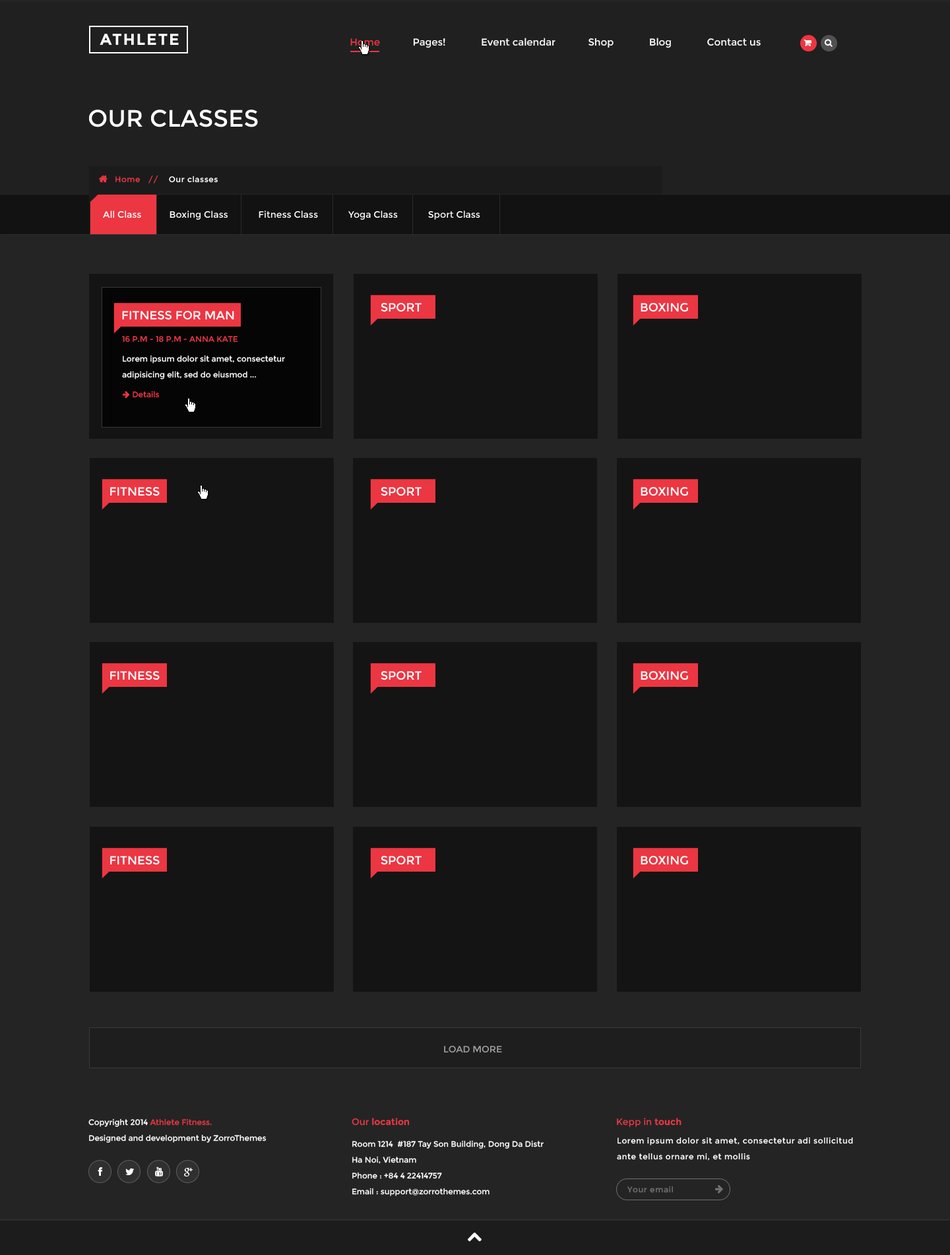
<style>
.page{position:relative;width:950px;height:1255px;background:#141414}
.page>*{position:absolute;margin:0}
.t1{font:15.8px "Montserrat-Bold";letter-spacing:0.075em;color:#ffffff;text-transform:uppercase}
.t2{font:9.9px "Montserrat-Regular";color:#ffffff}
.t3{font:9.9px "Montserrat-Regular";color:#ec3642}
.t4{font:23.8px "Montserrat-Regular";color:#ffffff;text-transform:uppercase}
.t5{font:7.9px "Montserrat-Regular";letter-spacing:0.05em;color:#ffffff}
.t6{font:7.9px "Montserrat-Regular";letter-spacing:0.05em;color:#ec3642}
.t7{font:9.2px "Montserrat-Regular";color:#fefefe}
.t8{font:11.9px "Montserrat-Regular";color:#ffffff;text-transform:uppercase}
.t9{font:7.9px "Montserrat-Regular";color:#ec3642;text-transform:uppercase}
.t10{font:7.9px/15.8px "Montserrat-Regular";color:#ffffff}
.t11{font:7.9px/19.8px "Montserrat-Regular";color:#ec3642}
.t12{font:9.2px "Montserrat-Regular";color:#a0a0a0;text-transform:uppercase}
.t13{font:7.9px/15.8px "Montserrat-Regular";color:#ec3642}
.t14{font:9.2px "Montserrat-Bold";color:#ec3642}
.t15{font:9.2px "Montserrat-Regular";color:#ec3642}
.t16{font:7.9px/15.8px "Montserrat-Regular";letter-spacing:0.05em;color:#ffffff}
.t17{font:7.9px "Montserrat-Regular";letter-spacing:0.05em;color:#717171}
</style>
<div class="page">
<p class="t1" style="left:100px;top:34px;width:79px;height:11px">Athlete</p>
<p class="t2" style="left:350px;top:38px;width:411px;height:10px"><span class="t3">Home  </span>          Pages!             Event calendar            Shop             Blog             Contact us</p>
<p class="t4" style="left:88px;top:110px;width:170px;height:17px">our classes</p>
<p class="t5" style="left:115px;top:176px;width:103px;height:7px"><span class="t6">Home   //    </span>Our classes</p>
<p class="t7" style="left:103px;top:210px;width:377px;height:10px">All Class           Boxing Class            Fitness Class            Yoga Class            Sport Class</p>
<p class="t8" style="left:381px;top:303px;width:41px;height:9px">sport</p>
<p class="t8" style="left:641px;top:303px;width:47px;height:9px">Boxing</p>
<p class="t8" style="left:122px;top:311px;width:112px;height:9px">fitness for man</p>
<p class="t9" style="left:122px;top:336px;width:116px;height:6px">16 P.M - 18 P.M - ANna kate</p>
<p class="t10" style="left:122px;top:355px;width:163px;height:43px">Lorem ipsum dolor sit amet, consectetur adipisicing elit, sed do eiusmod ...<br><span class="t11">    Details</span></p>
<p class="t8" style="left:110px;top:487px;width:50px;height:9px">fitness</p>
<p class="t8" style="left:381px;top:487px;width:41px;height:9px">sport</p>
<p class="t8" style="left:641px;top:487px;width:47px;height:9px">Boxing</p>
<p class="t8" style="left:110px;top:671px;width:50px;height:9px">fitness</p>
<p class="t8" style="left:381px;top:671px;width:41px;height:9px">sport</p>
<p class="t8" style="left:641px;top:671px;width:47px;height:9px">Boxing</p>
<p class="t8" style="left:110px;top:856px;width:50px;height:9px">fitness</p>
<p class="t8" style="left:381px;top:856px;width:41px;height:9px">sport</p>
<p class="t8" style="left:641px;top:856px;width:47px;height:9px">Boxing</p>
<p class="t12" style="left:444px;top:1046px;width:58px;height:6px">load more</p>
<p class="t10" style="left:88px;top:1118px;width:179px;height:25px">Copyright 2014 <span class="t13">Athlete Fitness. <br></span>Designed and development by ZorroThemes</p>
<p class="t14" style="left:352px;top:1118px;width:58px;height:8px"><span class="t15">Our </span>location</p>
<p class="t15" style="left:617px;top:1118px;width:65px;height:9px">Kepp in <span class="t14">touch</span></p>
<p class="t10" style="left:352px;top:1140px;width:192px;height:56px">Room 1214  #187 Tay Son Building, Dong Da Distr<br>Ha Noi, Vietnam<br>Phone : +84 4 22414757<br>Email : support@zorrothemes.com</p>
<p class="t16" style="left:617px;top:1137px;width:236px;height:24px">Lorem ipsum dolor sit amet, consectetur adi sollicitud ante tellus ornare mi, et mollis</p>
<p class="t17" style="left:627px;top:1186px;width:46px;height:7px">Your email</p>
</div>
